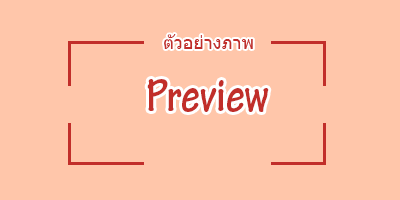
<style>
.page{position:relative;width:400px;height:200px;background:#ffc6aa}
.page>*{position:absolute;margin:0}
.t1{font:18px "Tahoma";color:#c12e2a}
.t2{font:50px "TektonPro-BoldCond";color:#c12e2a}
</style>
<div class="page">
<p class="t1" style="left:164px;top:34px;width:89px;height:15px">ตัวอย่างภาพ</p>
<p class="t2" style="left:147px;top:79px;width:122px;height:33px">Preview</p>
</div>
